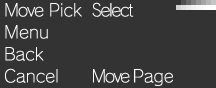
<style>
.page{position:relative;width:216px;height:88px;background:#333333}
.page>*{position:absolute;margin:0}
.t1{font:17px/22px "RodinNTLGPro-L";color:#fefefe}
.t2{font:17px/22px "RodinNTLGPro-L";letter-spacing:-0.075em;color:#fefefe}
.t3{font:17px/22px "RodinNTLGPro-L";letter-spacing:-0.075em;color:#fefefe;scale:0.9 1}
.t4{font:17px/22px "RodinNTLGPro-L";letter-spacing:-0.1em;color:#fefefe}
</style>
<div class="page">
<p class="t1" style="left:5px;top:2px;width:168px;height:84px"><span class="t2">Move</span> Pick  <span class="t3">S</span><span class="t2">elect </span><br>Menu<br>Back<br>Cancel     <span class="t4"> Move </span>Page</p>
</div>
